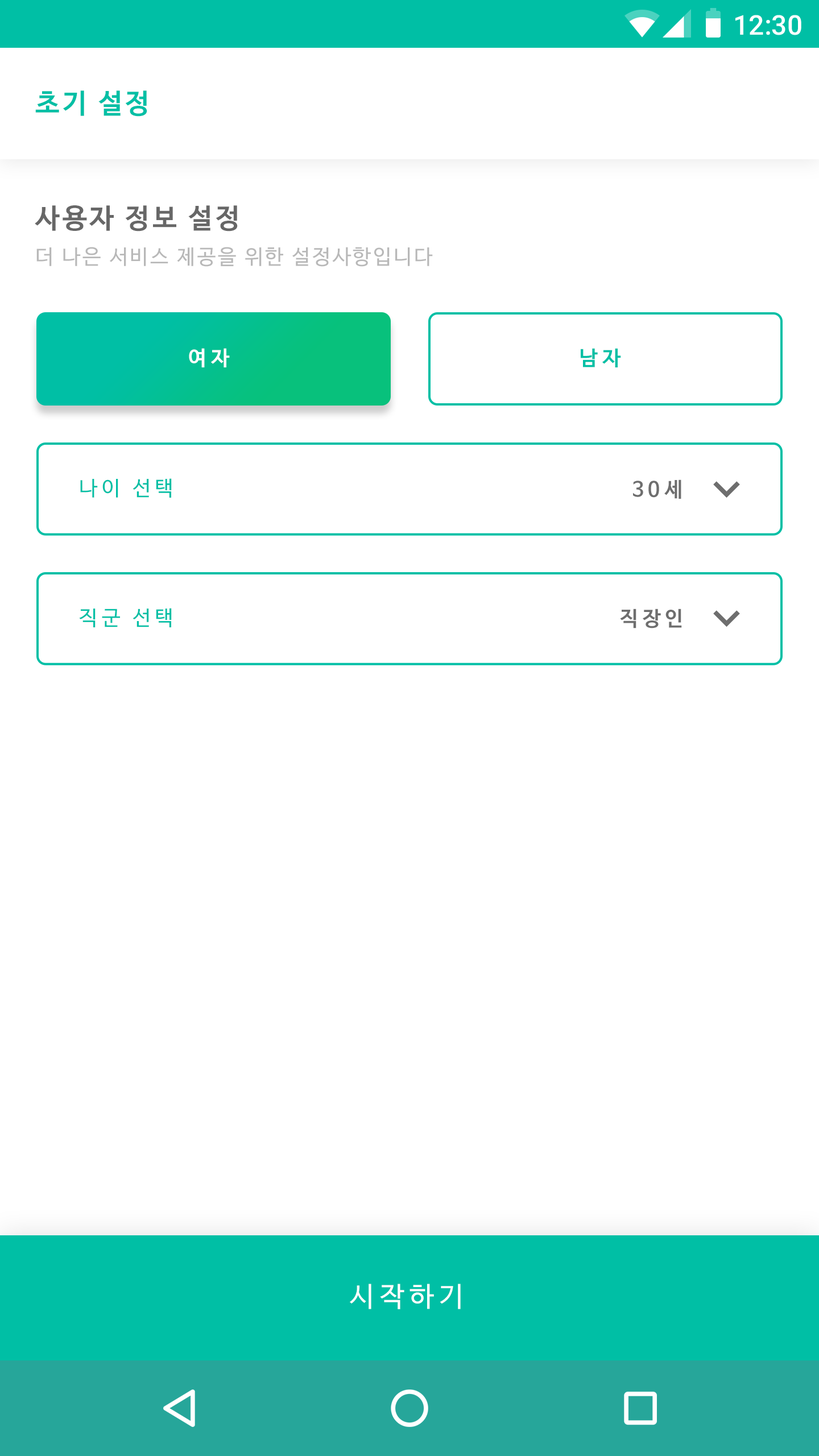
<style>
.page{position:relative;width:819px;height:1456px;background:#ffffff}
.page>*{position:absolute;margin:0}
.t1{font:27.3px "Roboto-Medium";color:#ffffff}
.t2{font:27.3px "NanumBarunGothicBold";letter-spacing:0.1em;color:#00bfa5}
.t3{font:27.3px "NanumBarunGothicBold";letter-spacing:0.1em;color:#676767}
.t4{font:20.5px "NanumBarunGothic";letter-spacing:0.1em;color:#b8b8b8}
.t5{font:20.5px "NanumBarunGothicBold";letter-spacing:0.2em;color:#ffffff}
.t6{font:20.5px "NanumBarunGothicBold";letter-spacing:0.2em;color:#00bfa5}
.t7{font:20.5px "NanumBarunGothic";letter-spacing:0.2em;color:#00bfa5}
.t8{font:20.5px "NanumBarunGothicBold";letter-spacing:0.2em;color:#6d6d6d}
.t9{font:27.3px "NanumBarunGothic";letter-spacing:0.2em;color:#ffffff}
</style>
<div class="page">
<p class="t1" style="left:735px;top:15px;width:66px;height:20px">12:30</p>
<p class="t2" style="left:35px;top:90px;width:112px;height:27px">초기 설정</p>
<p class="t3" style="left:35px;top:205px;width:203px;height:26px">사용자 정보 설정</p>
<p class="t4" style="left:36px;top:247px;width:397px;height:20px">더 나은 서비스 제공을 위한 설정사항입니다</p>
<p class="t5" style="left:189px;top:348px;width:41px;height:19px">여자</p>
<p class="t6" style="left:581px;top:348px;width:40px;height:19px">남자</p>
<p class="t7" style="left:80px;top:478px;width:92px;height:20px">나이 선택</p>
<p class="t8" style="left:633px;top:479px;width:48px;height:20px">30세</p>
<p class="t7" style="left:79px;top:608px;width:93px;height:19px">직군 선택</p>
<p class="t8" style="left:620px;top:609px;width:62px;height:19px">직장인</p>
<p class="t9" style="left:350px;top:1284px;width:111px;height:25px">시작하기</p>
</div>
